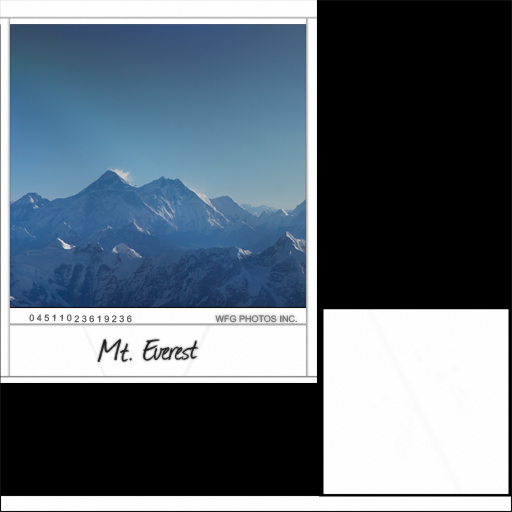
<style>
.page{position:relative;width:512px;height:512px;background:#000000}
.page>*{position:absolute;margin:0}
.t1{font:9px "ArialMT";color:#585858}
.t2{font:9px "ArialMT";color:#787878}
.t3{font:36px "Journal";color:#252525}
</style>
<div class="page">
<p class="t1" style="left:29px;top:314px;width:103px;height:9px;rotate:1deg">0 4 5 1 1 0 2 3 6 1 9 2 3 6</p>
<p class="t2" style="left:215px;top:315px;width:82px;height:8px">WFG PHOTOS INC.</p>
<p class="t3" style="left:97px;top:339px;width:101px;height:23px;rotate:-2deg">Mt. Everest</p>
</div>
